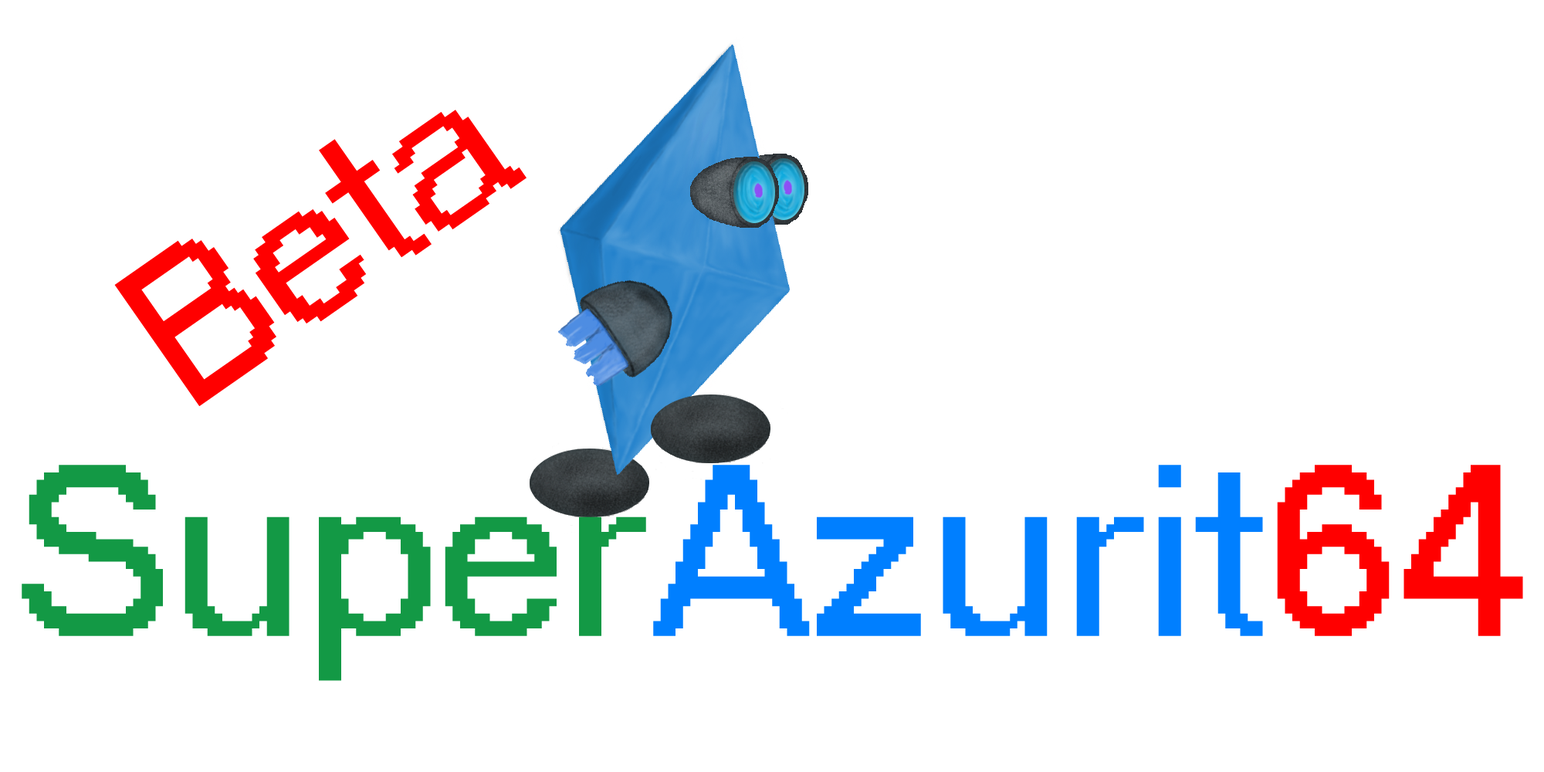
<style>
.page{position:relative;width:1544px;height:772px;background:#ffffff}
.page>*{position:absolute;margin:0}
.t1{font:205.9px "MS Sans Serif";color:#ff0000}
.t2{font:237.8px "MS Sans Serif";color:#007fff}
.t3{font:237.8px "MS Sans Serif";color:#139945}
.t4{font:237.8px "MS Sans Serif";color:#ff0000}
</style>
<div class="page">
<p class="t1" style="left:114px;top:110px;width:413px;height:296px;rotate:-35deg">Beta</p>
<p class="t2" style="left:22px;top:465px;width:1501px;height:216px"><span class="t3">Super</span>Azurit<span class="t4">64</span></p>
</div>
